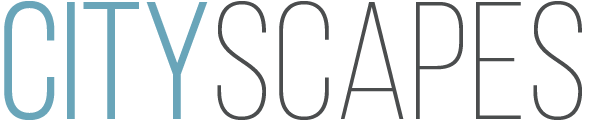
<style>
.page{position:relative;width:593px;height:135px;background:#ffffff}
.page>*{position:absolute;margin:0}
.t1{font:167px "BebasNeueLight";color:#4b4d4e}
.t2{font:167px "BebasNeueBook";color:#69a5b9}
</style>
<div class="page">
<p class="t1" style="left:4px;top:1px;width:578px;height:119px"><span class="t2">city</span>scapes</p>
</div>
